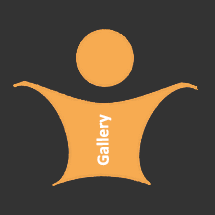
<style>
.page{position:relative;width:215px;height:215px;background:#333333}
.page>*{position:absolute;margin:0}
.t1{font:17.3px "Calibri-Bold";color:#ffffff}
</style>
<div class="page">
<p class="t1" style="left:96px;top:114px;width:16px;height:52px;rotate:-91deg">Gallery</p>
</div>
